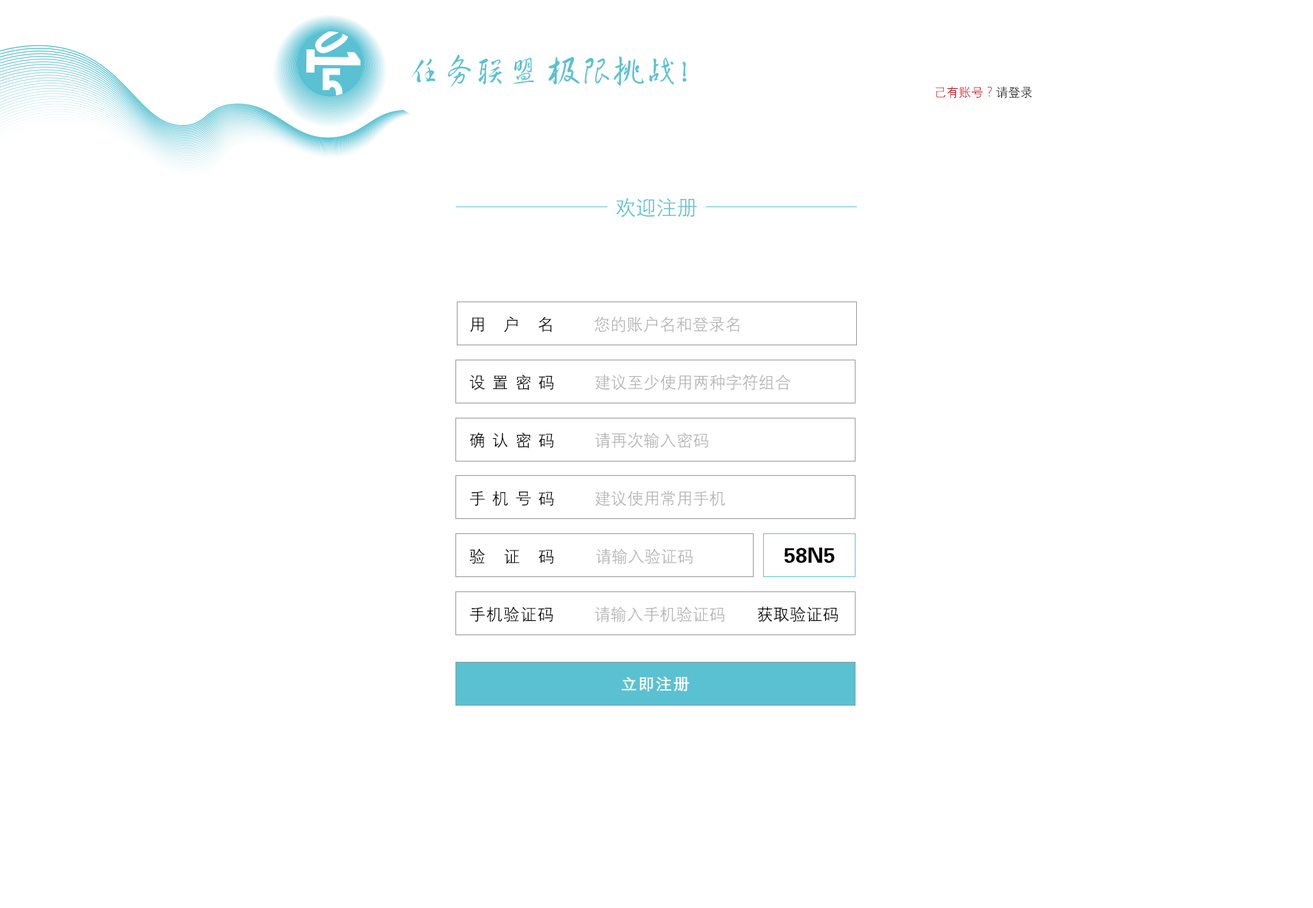
<style>
.page{position:relative;width:1313px;height:908px;background:#ffffff}
.page>*{position:absolute;margin:0}
.t1{font:35.5px "FZHCJW--GB1-0";letter-spacing:-0.08em;color:#59c1d2}
.t2{font:12.3px "DengXian-Regular";color:#cb000f}
.t3{font:12.3px "DengXian-Regular";color:#000000}
.t4{font:20.5px "DengXian-Regular";color:#59c1d2}
.t5{font:16.4px/58px "DengXian-Regular";color:#b4b4b5}
.t6{font:16.4px/58px "DengXian-Regular";letter-spacing:1.08em;color:#000000}
.t7{font:16.4px/58px "DengXian-Regular";letter-spacing:0.4em;color:#000000}
.t8{font:16.4px/58px "DengXian-Regular";letter-spacing:1.1em;color:#000000}
.t9{font:16.4px/58px "DengXian-Regular";letter-spacing:0.04em;color:#000000}
.t10{font:16.4px/58px "DengXian-Regular";color:#000000}
.t11{font:21px "FZDHTJW--GB1-0";color:#000000}
.t12{font:16.4px "DengXian-Bold";letter-spacing:0.06em;color:#ffffff}
</style>
<div class="page">
<p class="t1" style="left:411px;top:55px;width:276px;height:33px">任务联盟  极限挑战！</p>
<p class="t2" style="left:936px;top:86px;width:96px;height:12px">己有账号？<span class="t3">请登录</span></p>
<p class="t4" style="left:615px;top:198px;width:82px;height:19px">欢迎注册</p>
<p class="t5" style="left:469px;top:317px;width:369px;height:305px"><span class="t6">用户名 </span>您的账户名和登录名<br><span class="t7">设置密码   </span>建议至少使用两种字符组合<br><span class="t7">确认密码   </span>请再次输入密码<br><span class="t7">手机号码   </span>建议使用常用手机<br><span class="t8">验证码 </span>请输入验证码<br><span class="t9">手机验证码       </span>请输入手机验证码<span class="t10">       获取验证码</span></p>
<p class="t11" style="left:784px;top:547px;width:50px;height:17px">58N5</p>
<p class="t12" style="left:622px;top:676px;width:67px;height:16px">立即注册</p>
</div>
